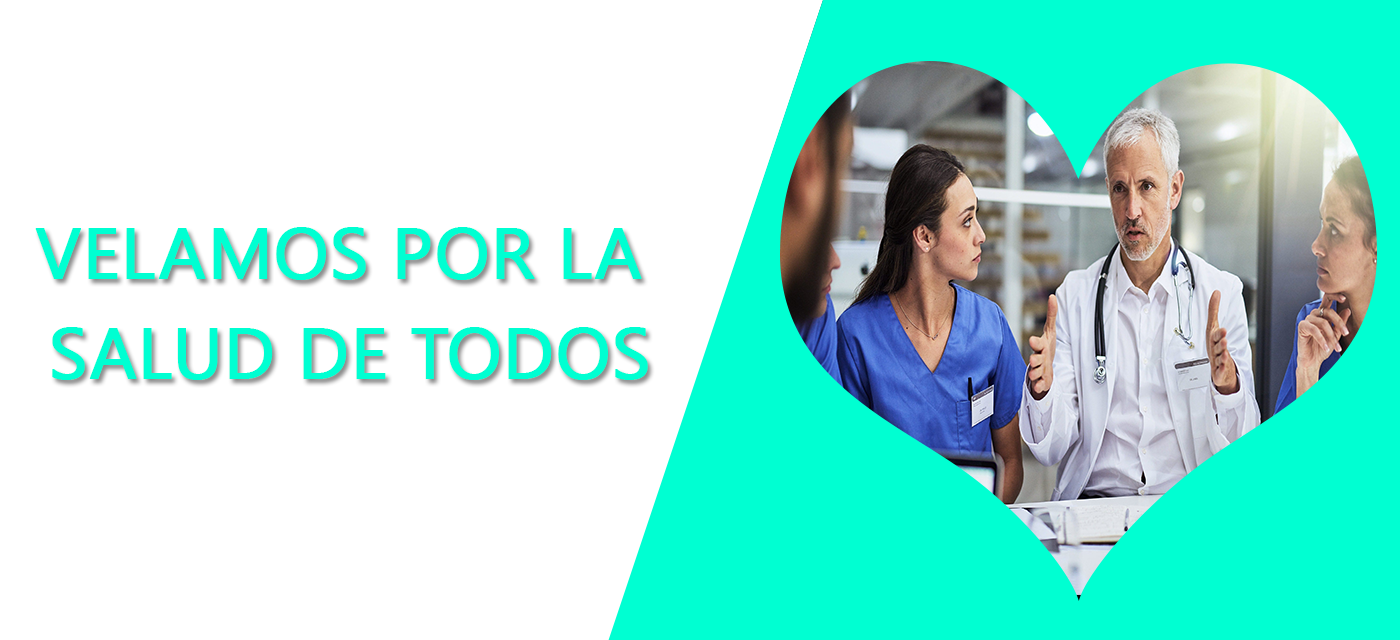
<style>
.page{position:relative;width:1400px;height:640px;background:#ffffff}
.page>*{position:absolute;margin:0}
.t1{font:72px/100px "SegoeUI";color:#00ffd2;font-weight:bold}
</style>
<div class="page">
<p class="t1" style="left:35px;top:227px;width:613px;height:153px;text-align:center">VELAMOS POR LA <br>SALUD DE TODOS</p>
</div>
